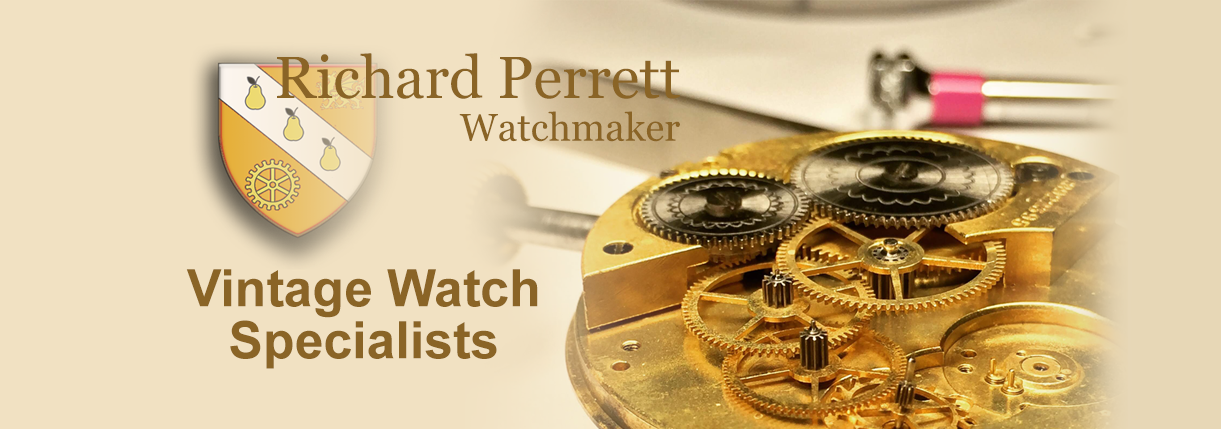
<style>
.page{position:relative;width:1221px;height:429px;background:#f1e1c2}
.page>*{position:absolute;margin:0}
.t1{font:59.4px "Georgia";color:#8a6426}
.t2{font:38.9px "Georgia";color:#8a6426}
.t3{font:51.8px/51.8px "Arial-BoldMT";color:#8a6426}
</style>
<div class="page">
<p class="t1" style="left:277px;top:53px;width:403px;height:46px">Richard Perrett</p>
<p class="t2" style="left:459px;top:111px;width:221px;height:31px">Watchmaker</p>
<p class="t3" style="left:186px;top:269px;width:352px;height:100px;text-align:center">Vintage Watch<br>Specialists</p>
</div>
